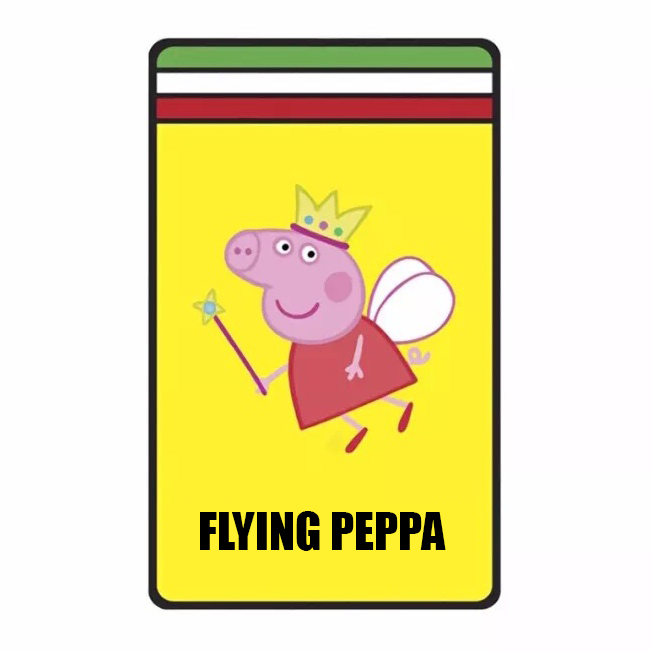
<style>
.page{position:relative;width:651px;height:651px;background:#fefefe}
.page>*{position:absolute;margin:0}
.t1{font:48px "Impact";color:#000000}
.t2{font:12px "MyriadPro-Regular";color:#fff130}
</style>
<div class="page">
<p class="t1" style="left:192px;top:511px;width:254px;height:40px"><span class="t2">F</span>FLYING PEPPA</p>
</div>
